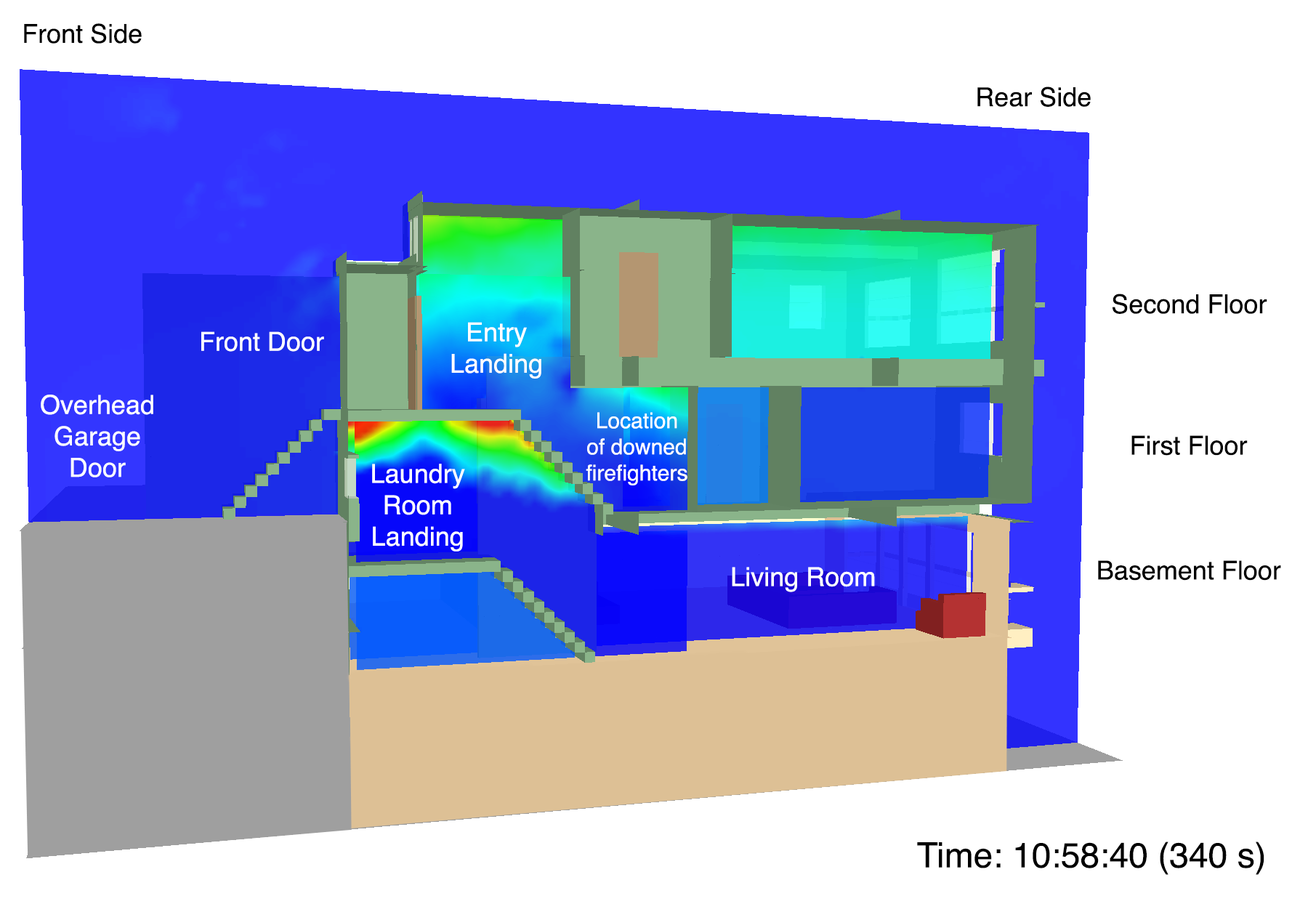
<style>
.page{position:relative;width:1308px;height:912px;background:#ffffff}
.page>*{position:absolute;margin:0}
.t1{font:26.2px "Helvetica";color:#000000}
.t2{font:26.2px "Helvetica";color:#ffffff}
.t3{font:21.8px "Helvetica";color:#ffffff}
.t4{font:34.9px "Helvetica";color:#000000}
</style>
<div class="page">
<p class="t1" style="left:24px;top:23px;width:118px;height:21px">Front Side</p>
<p class="t1" style="left:977px;top:86px;width:114px;height:21px">Rear Side</p>
<p class="t1" style="left:1112px;top:294px;width:155px;height:20px">Second Floor</p>
<p class="t2" style="left:451px;top:322px;width:90px;height:57px;text-align:center">Entry<br>Landing</p>
<p class="t2" style="left:201px;top:331px;width:123px;height:21px">Front Door</p>
<p class="t2" style="left:41px;top:395px;width:112px;height:82px;text-align:center">Overhead<br>Garage<br>Door</p>
<p class="t3" style="left:586px;top:412px;width:101px;height:73px;text-align:center">Location<br>of downed<br>firefighters</p>
<p class="t1" style="left:1131px;top:435px;width:116px;height:21px">First Floor</p>
<p class="t2" style="left:372px;top:464px;width:93px;height:87px;text-align:center">Laundry<br>Room<br>Landing</p>
<p class="t2" style="left:732px;top:567px;width:143px;height:25px">Living Room</p>
<p class="t1" style="left:1098px;top:560px;width:183px;height:21px">Basement Floor</p>
<p class="t4" style="left:917px;top:841px;width:347px;height:34px">Time: 10:58:40 (340 s)</p>
</div>
